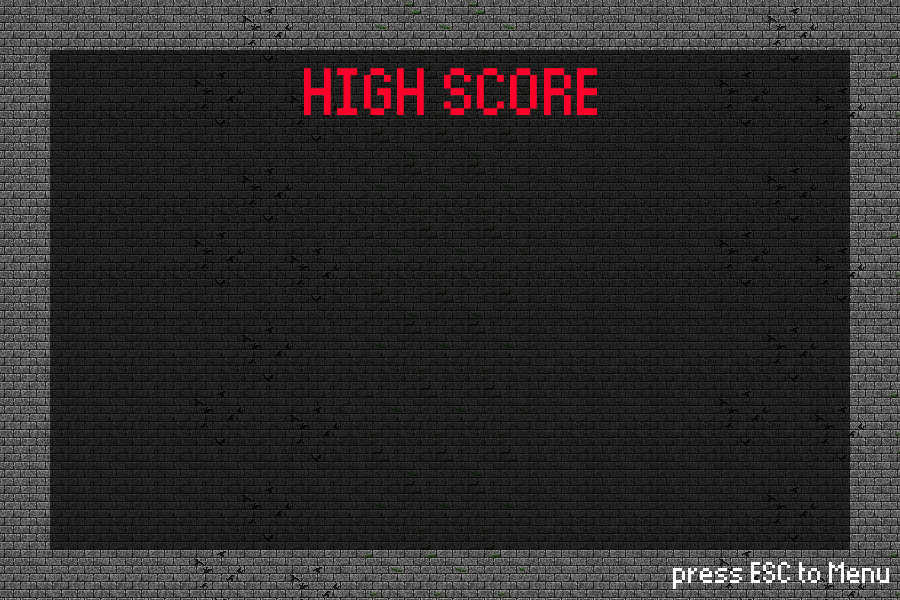
<style>
.page{position:relative;width:900px;height:600px;background:#262626}
.page>*{position:absolute;margin:0}
.t1{font:106.7px "Thintel";color:#ff002b}
.t2{font:48px "Thintel";color:#ffffff}
</style>
<div class="page">
<p class="t1" style="left:304px;top:68px;width:293px;height:47px">HIGH SCORE</p>
<p class="t2" style="left:673px;top:562px;width:216px;height:27px">press ESC to Menu</p>
</div>
